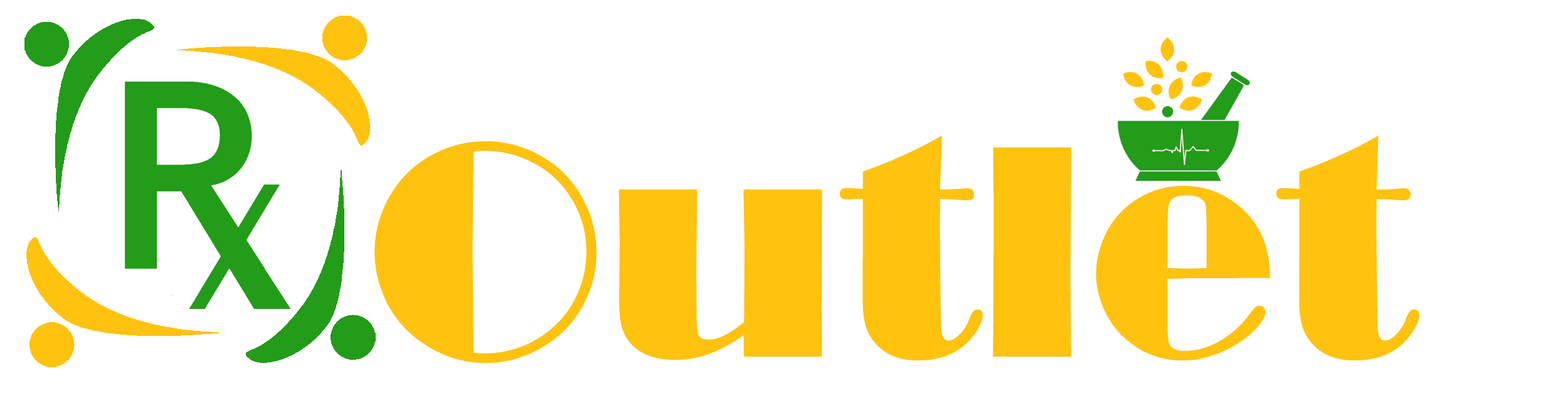
<style>
.page{position:relative;width:1568px;height:405px;background:#ffffff}
.page>*{position:absolute;margin:0}
.t1{font:313px "Broadway";color:#ffc20e}
</style>
<div class="page">
<p class="t1" style="left:374px;top:135px;width:1045px;height:228px">Outlet</p>
</div>
